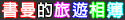
<style>
.page{position:relative;width:125px;height:20px;background:#333333}
.page>*{position:absolute;margin:0}
.t1{font:16px "AdobeFanHeitiStd-Bold";letter-spacing:0.075em;color:#ffffff}
</style>
<div class="page">
<p class="t1" style="left:2px;top:2px;width:16px;height:16px">書</p>
<p class="t1" style="left:20px;top:2px;width:16px;height:16px">曼</p>
<p class="t1" style="left:38px;top:2px;width:14px;height:16px">的</p>
<p class="t1" style="left:54px;top:2px;width:16px;height:16px">旅</p>
<p class="t1" style="left:72px;top:2px;width:16px;height:16px">遊</p>
<p class="t1" style="left:89px;top:2px;width:15px;height:16px">相</p>
<p class="t1" style="left:107px;top:2px;width:16px;height:16px">簿</p>
</div>
